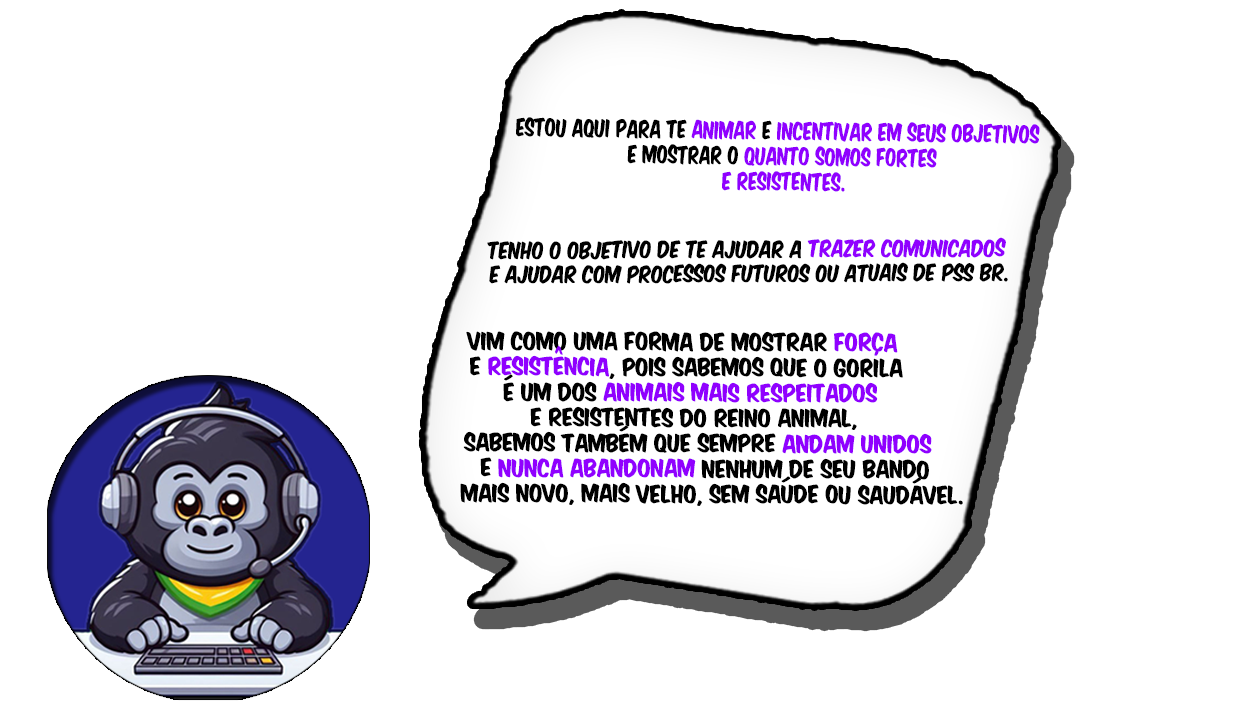
<style>
.page{position:relative;width:1240px;height:720px;background:#ffffff}
.page>*{position:absolute;margin:0}
.t1{font:21.2px "KomikaAxis";color:#9000ff;scale:0.74 1}
.t2{font:21.2px "KomikaAxis";color:#000000;scale:0.74 1}
.t3{font:20.3px "KomikaAxis";color:#000000;scale:0.83 1}
.t4{font:20.3px "KomikaAxis";color:#9000ff;scale:0.83 1}
.t5{font:21.4px "KomikaAxis";color:#000000;scale:0.88 1}
.t6{font:21.4px "KomikaAxis";color:#9000ff;scale:0.88 1}
</style>
<div class="page">
<p class="t1" style="left:516px;top:117px;width:524px;height:75px;text-align:center;rotate:1deg"><span class="t2">Estou aqui para te </span>animar <span class="t2">e </span>incentivar em seus objetivos<br><span class="t2"> e mostrar o </span>quanto somos fortes<br> e resistentes.</p>
<p class="t3" style="left:487px;top:237px;width:521px;height:47px;text-align:center">Tenho o objetivo de te ajudar a <span class="t4">trazer comunicados</span> <br>e ajudar com processos futuros ou atuais de PSS BR.</p>
<p class="t5" style="left:460px;top:331px;width:503px;height:175px;text-align:center">Vim como uma forma de mostrar <span class="t6">força <br></span>e <span class="t6">resistência</span>, pois sabemos que o gorila <br>é um dos <span class="t6">animais mais respeitados</span> <br>e resistentes do reino animal, <br>sabemos também que sempre <span class="t6">andam unidos</span> <br>e <span class="t6">nunca abandonam</span> nenhum de seu bando<br> mais novo, mais velho, sem saúde ou saudável.</p>
</div>
